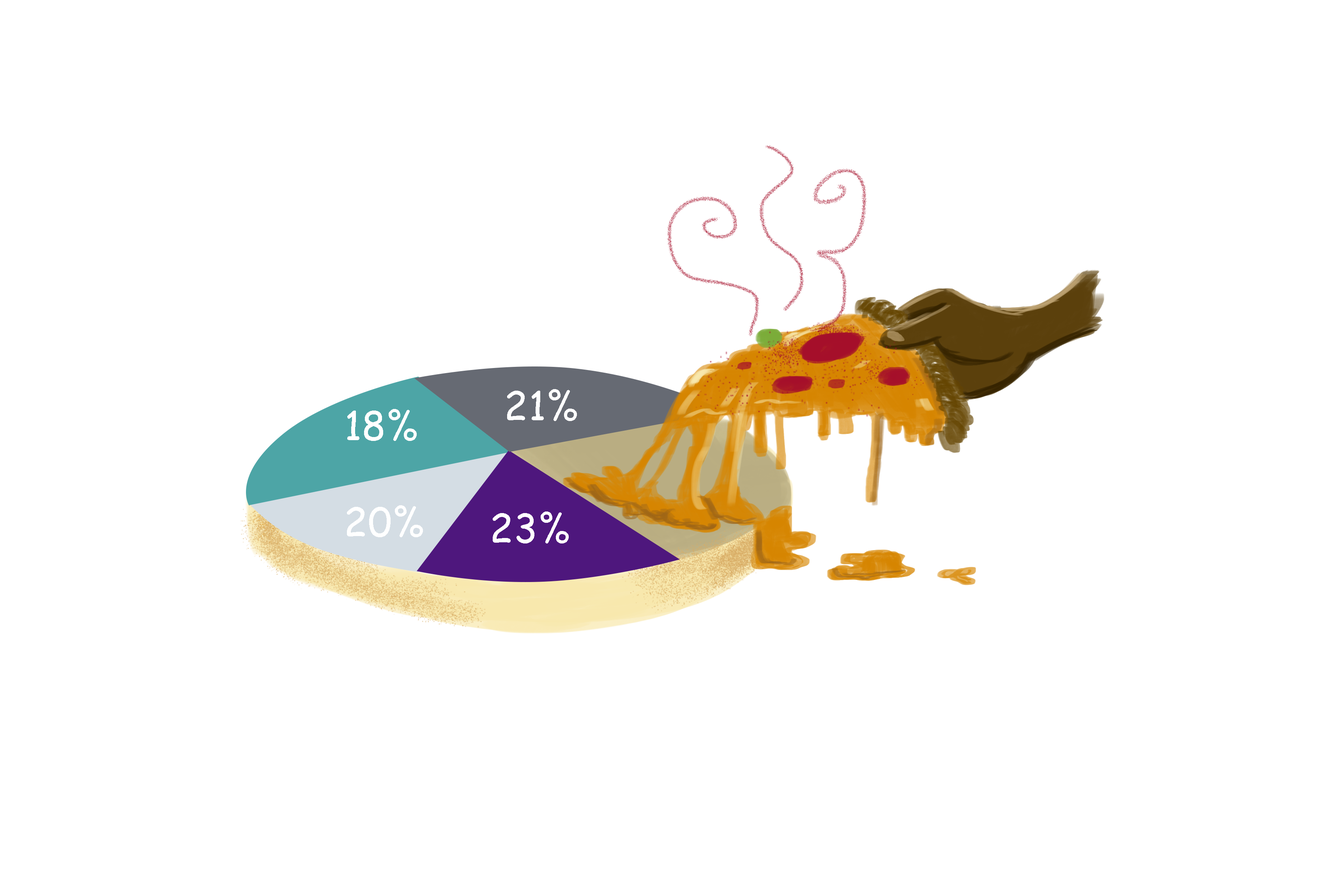
<style>
.page{position:relative;width:1337px;height:892px;background:#ffffff}
.page>*{position:absolute;margin:0}
.t1{font:39px "ComicSansMS";letter-spacing:0.01em;color:#ffffff}
</style>
<div class="page">
<p class="t1" style="left:507px;top:389px;width:70px;height:32px">21%</p>
<p class="t1" style="left:347px;top:409px;width:70px;height:32px">18%</p>
<p class="t1" style="left:347px;top:505px;width:76px;height:32px">20%</p>
<p class="t1" style="left:493px;top:511px;width:76px;height:32px">23%</p>
</div>
